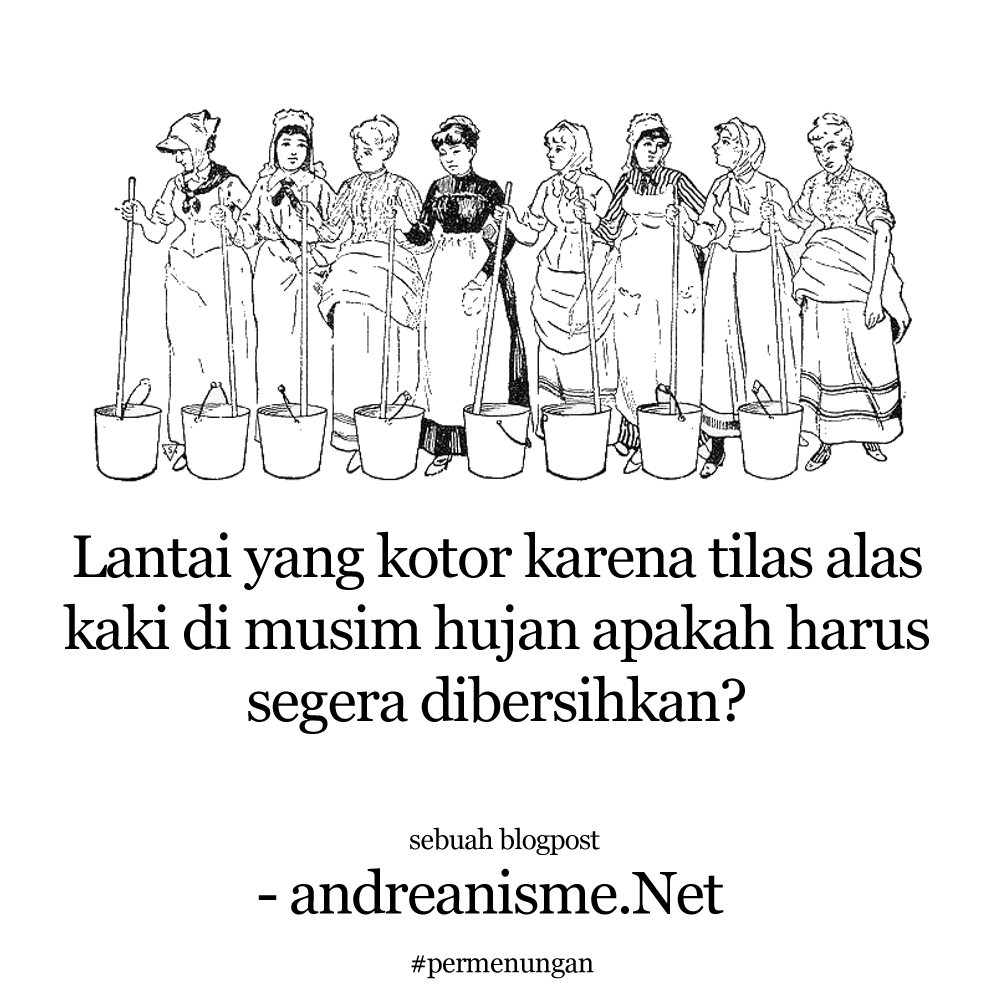
<style>
.page{position:relative;width:1000px;height:1000px;background:#ffffff}
.page>*{position:absolute;margin:0}
.t1{font:60px "Georgia";letter-spacing:-0.025em;color:#000000}
.t2{font:28px "Georgia";letter-spacing:-0.025em;color:#000000}
</style>
<div class="page">
<p class="t1" style="left:63px;top:531px;width:866px;height:203px;text-align:center">Lantai yang kotor karena tilas alas kaki di musim hujan apakah harus segera dibersihkan?</p>
<p class="t2" style="left:410px;top:827px;width:190px;height:28px">sebuah blogpost</p>
<p class="t1" style="left:258px;top:868px;width:466px;height:47px">- andreanisme.Net</p>
<p class="t2" style="left:411px;top:955px;width:183px;height:24px">#permenungan</p>
</div>
